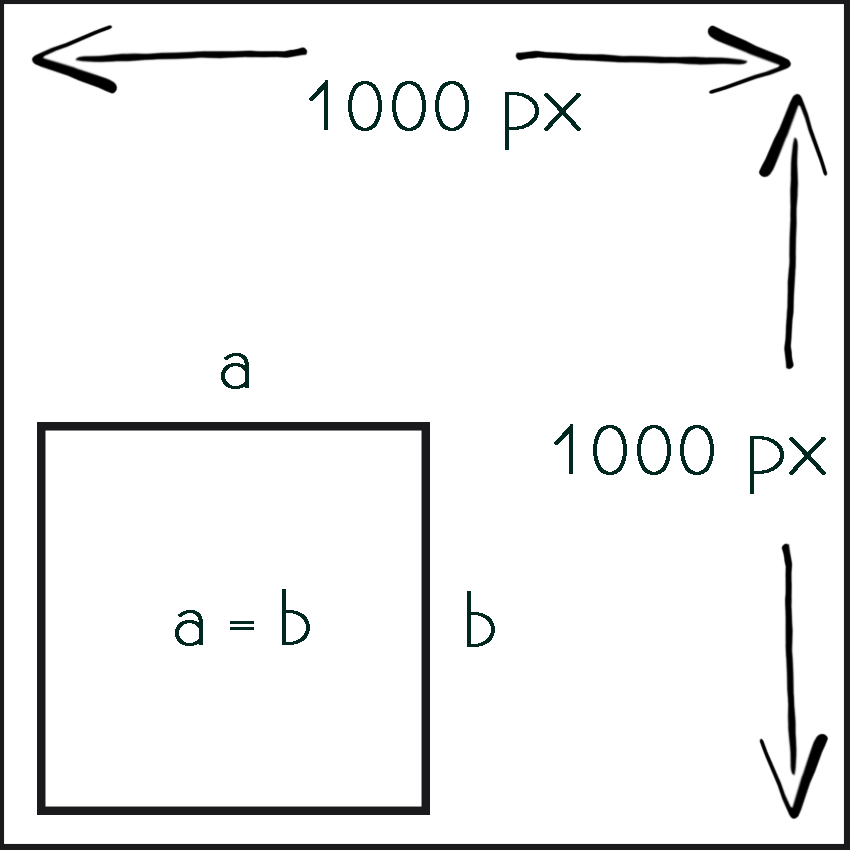
<style>
.page{position:relative;width:850px;height:850px;background:#ffffff}
.page>*{position:absolute;margin:0}
.t1{font:66.6px "Existence-Light";letter-spacing:-0.005em;color:#002720;font-weight:bold;scale:1.16 1}
.t2{font:61.8px "Existence-Light";letter-spacing:-0.005em;color:#002720;font-weight:bold}
</style>
<div class="page">
<p class="t1" style="left:309px;top:80px;width:272px;height:70px">1000 px</p>
<p class="t2" style="left:221px;top:353px;width:28px;height:36px">a</p>
<p class="t1" style="left:554px;top:424px;width:272px;height:70px">1000 px</p>
<p class="t2" style="left:175px;top:589px;width:135px;height:57px">a = b</p>
<p class="t2" style="left:467px;top:591px;width:28px;height:56px">b</p>
</div>
